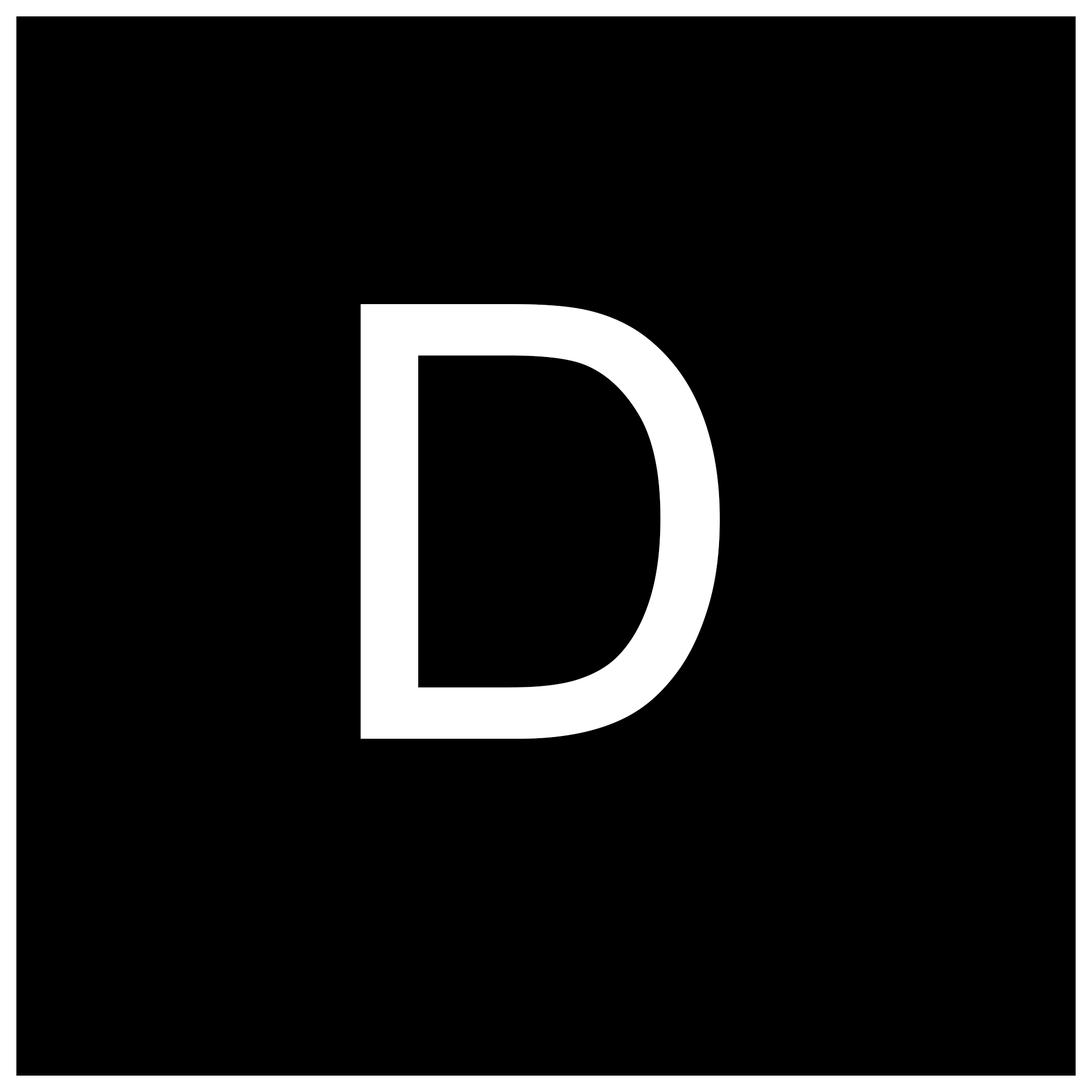
<style>
.page{position:relative;width:1092px;height:1092px;background:#000000}
.page>*{position:absolute;margin:0}
.t1{font:606.7px "ArialMT";color:#ffffff}
</style>
<div class="page">
<p class="t1" style="left:360px;top:304px;width:360px;height:435px">D</p>
</div>
